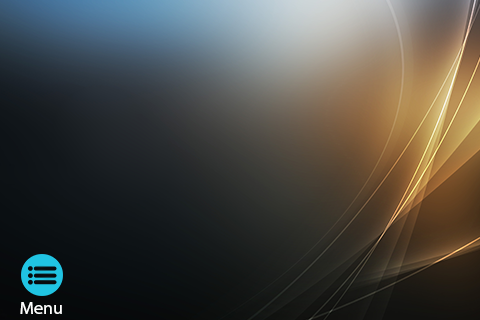
<style>
.page{position:relative;width:480px;height:320px}
.page>*{position:absolute;margin:0}
.t1{font:25px "MyriadArabic-Regular";color:#ffffff}
</style>
<div class="page">
<p class="t1" style="left:20px;top:302px;width:42px;height:12px">Menu</p>
</div>
